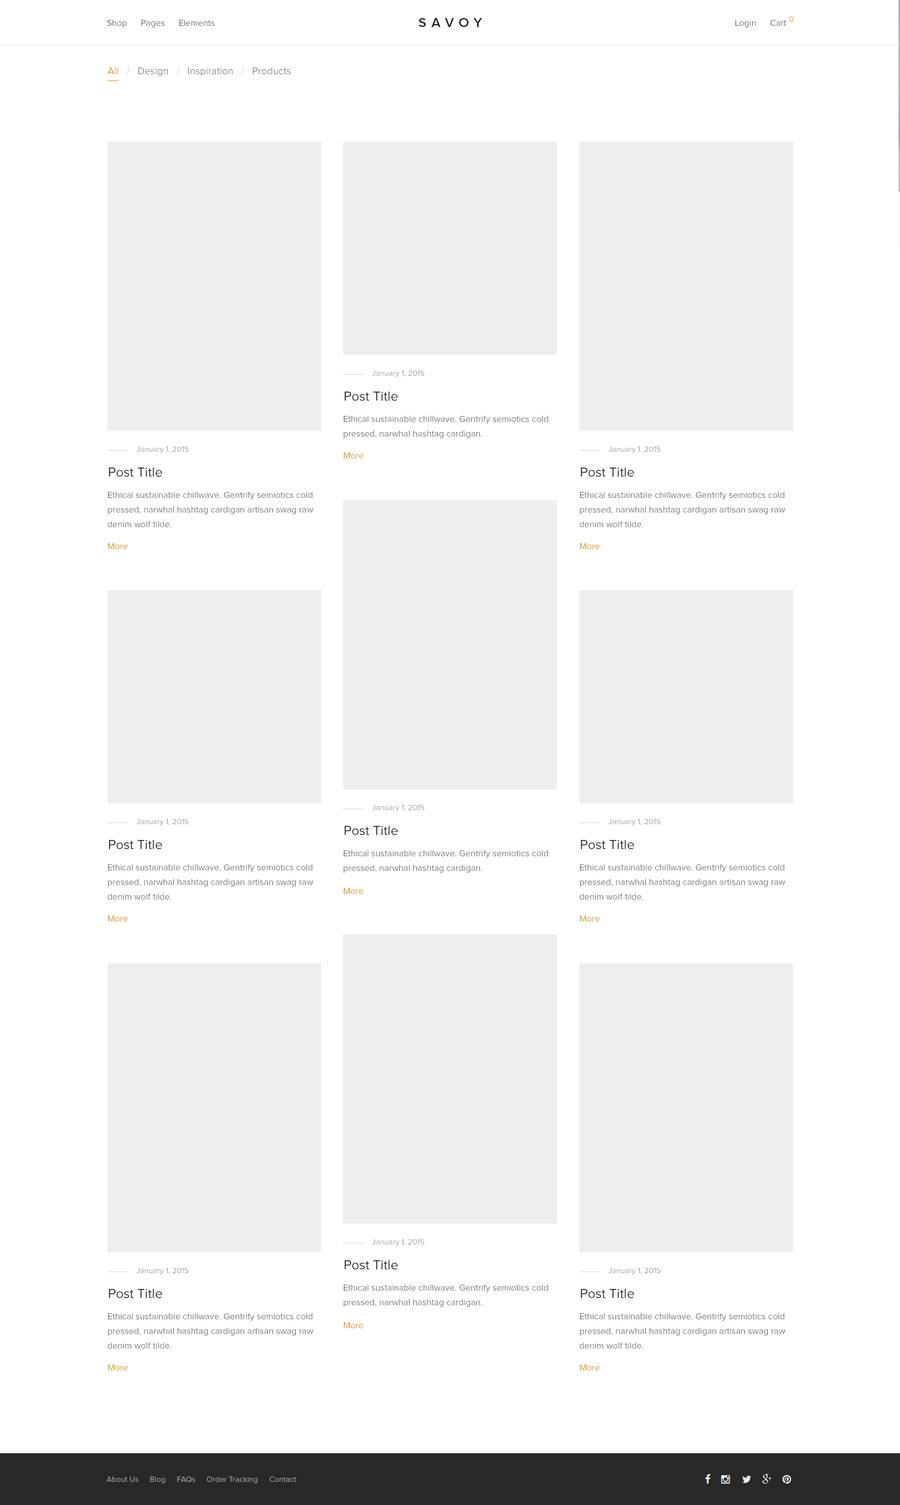
<style>
.page{position:relative;width:900px;height:1505px;background:#ffffff}
.page>*{position:absolute;margin:0}
.t1{font:7.9px "ProximaNova-Regular";color:#dc9814}
.t2{font:9px "ProximaNova-Regular";color:#707070}
.t3{font:13.5px "ProximaNova-Semibold";letter-spacing:0.37em;color:#282828;text-transform:uppercase}
.t4{font:10.1px "ProximaNova-Regular";color:#dc9814}
.t5{font:10.1px "ProximaNova-Regular";color:#cccccc}
.t6{font:10.1px "ProximaNova-Regular";color:#888888}
.t7{font:7.9px "ProximaNova-Regular";color:#a0a0a0}
.t8{font:13.5px "ProximaNova-Regular";color:#282828}
.t9{font:9px/14.6px "ProximaNova-Regular";color:#777777}
.t10{font:9px "ProximaNova-Regular";color:#dc9814}
.t11{font:7.9px "ProximaNova-Regular";color:#aaaaaa}
</style>
<div class="page">
<p class="t1" style="left:789px;top:16px;width:5px;height:6px">0</p>
<p class="t2" style="left:107px;top:20px;width:20px;height:8px">Shop</p>
<p class="t2" style="left:141px;top:20px;width:24px;height:8px">Pages</p>
<p class="t2" style="left:179px;top:20px;width:36px;height:6px">Elements</p>
<p class="t3" style="left:418px;top:18px;width:64px;height:9px">savoy</p>
<p class="t2" style="left:735px;top:20px;width:21px;height:8px">Login</p>
<p class="t2" style="left:770px;top:20px;width:16px;height:6px">Cart</p>
<p class="t4" style="left:107px;top:67px;width:11px;height:7px">All</p>
<p class="t5" style="left:127px;top:67px;width:3px;height:8px">/</p>
<p class="t6" style="left:138px;top:67px;width:30px;height:9px">Design</p>
<p class="t5" style="left:177px;top:67px;width:3px;height:8px">/</p>
<p class="t6" style="left:188px;top:67px;width:45px;height:9px">Inspiration</p>
<p class="t5" style="left:241px;top:67px;width:4px;height:8px">/</p>
<p class="t6" style="left:253px;top:67px;width:38px;height:7px">Products</p>
<p class="t7" style="left:372px;top:370px;width:52px;height:7px">January 1, 2015</p>
<p class="t8" style="left:344px;top:392px;width:54px;height:9px">Post Title</p>
<p class="t9" style="left:344px;top:416px;width:204px;height:22px;text-align:right">Ethical sustainable chillwave. Gentrify semiotics cold<br>pressed, narwhal hashtag cardigan.</p>
<p class="t7" style="left:136px;top:446px;width:52px;height:7px">January 1, 2015</p>
<p class="t7" style="left:608px;top:446px;width:52px;height:7px">January 1, 2015</p>
<p class="t10" style="left:344px;top:452px;width:19px;height:6px">More</p>
<p class="t8" style="left:109px;top:467px;width:53px;height:10px">Post Title</p>
<p class="t8" style="left:580px;top:467px;width:54px;height:10px">Post Title</p>
<p class="t9" style="left:107px;top:492px;width:206px;height:35px;text-align:right">Ethical sustainable chillwave. Gentrify semiotics cold<br>pressed, narwhal hashtag cardigan artisan swag raw<br>denim wolf tilde.</p>
<p class="t9" style="left:579px;top:492px;width:206px;height:35px;text-align:right">Ethical sustainable chillwave. Gentrify semiotics cold<br>pressed, narwhal hashtag cardigan artisan swag raw<br>denim wolf tilde.</p>
<p class="t10" style="left:108px;top:543px;width:20px;height:6px">More</p>
<p class="t10" style="left:580px;top:543px;width:20px;height:6px">More</p>
<p class="t7" style="left:372px;top:804px;width:52px;height:8px">January 1, 2015</p>
<p class="t7" style="left:136px;top:818px;width:52px;height:8px">January 1, 2015</p>
<p class="t7" style="left:608px;top:818px;width:52px;height:8px">January 1, 2015</p>
<p class="t8" style="left:344px;top:826px;width:54px;height:9px">Post Title</p>
<p class="t8" style="left:109px;top:840px;width:53px;height:9px">Post Title</p>
<p class="t8" style="left:580px;top:840px;width:54px;height:9px">Post Title</p>
<p class="t9" style="left:344px;top:850px;width:204px;height:22px;text-align:right">Ethical sustainable chillwave. Gentrify semiotics cold<br>pressed, narwhal hashtag cardigan.</p>
<p class="t9" style="left:107px;top:864px;width:206px;height:35px;text-align:right">Ethical sustainable chillwave. Gentrify semiotics cold<br>pressed, narwhal hashtag cardigan artisan swag raw<br>denim wolf tilde.</p>
<p class="t9" style="left:579px;top:864px;width:206px;height:35px;text-align:right">Ethical sustainable chillwave. Gentrify semiotics cold<br>pressed, narwhal hashtag cardigan artisan swag raw<br>denim wolf tilde.</p>
<p class="t10" style="left:344px;top:888px;width:19px;height:6px">More</p>
<p class="t10" style="left:108px;top:915px;width:20px;height:6px">More</p>
<p class="t10" style="left:580px;top:915px;width:20px;height:6px">More</p>
<p class="t7" style="left:372px;top:1239px;width:52px;height:7px">January 1, 2015</p>
<p class="t8" style="left:344px;top:1260px;width:54px;height:10px">Post Title</p>
<p class="t7" style="left:136px;top:1267px;width:52px;height:8px">January 1, 2015</p>
<p class="t7" style="left:608px;top:1267px;width:52px;height:8px">January 1, 2015</p>
<p class="t8" style="left:109px;top:1289px;width:53px;height:9px">Post Title</p>
<p class="t9" style="left:344px;top:1284px;width:204px;height:23px;text-align:right">Ethical sustainable chillwave. Gentrify semiotics cold<br>pressed, narwhal hashtag cardigan.</p>
<p class="t8" style="left:580px;top:1289px;width:54px;height:9px">Post Title</p>
<p class="t9" style="left:107px;top:1313px;width:206px;height:35px;text-align:right">Ethical sustainable chillwave. Gentrify semiotics cold<br>pressed, narwhal hashtag cardigan artisan swag raw<br>denim wolf tilde.</p>
<p class="t9" style="left:579px;top:1313px;width:206px;height:35px;text-align:right">Ethical sustainable chillwave. Gentrify semiotics cold<br>pressed, narwhal hashtag cardigan artisan swag raw<br>denim wolf tilde.</p>
<p class="t10" style="left:344px;top:1322px;width:19px;height:6px">More</p>
<p class="t10" style="left:108px;top:1364px;width:20px;height:6px">More</p>
<p class="t10" style="left:580px;top:1364px;width:20px;height:6px">More</p>
<p class="t11" style="left:106px;top:1476px;width:32px;height:6px">About Us</p>
<p class="t11" style="left:150px;top:1476px;width:15px;height:7px">Blog</p>
<p class="t11" style="left:177px;top:1476px;width:18px;height:6px">FAQs</p>
<p class="t11" style="left:207px;top:1476px;width:51px;height:7px">Order Tracking</p>
<p class="t11" style="left:269px;top:1476px;width:27px;height:6px">Contact</p>
</div>
